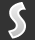
<style>
.page{position:relative;width:35px;height:40px;background:#333333}
.page>*{position:absolute;margin:0}
.t1{font:50px "BerlinSansFBDemi-Bold";letter-spacing:0.2em}
</style>
<div class="page">
<p class="t1" style="left:8px;top:2px;width:18px;height:37px">S</p>
</div>
